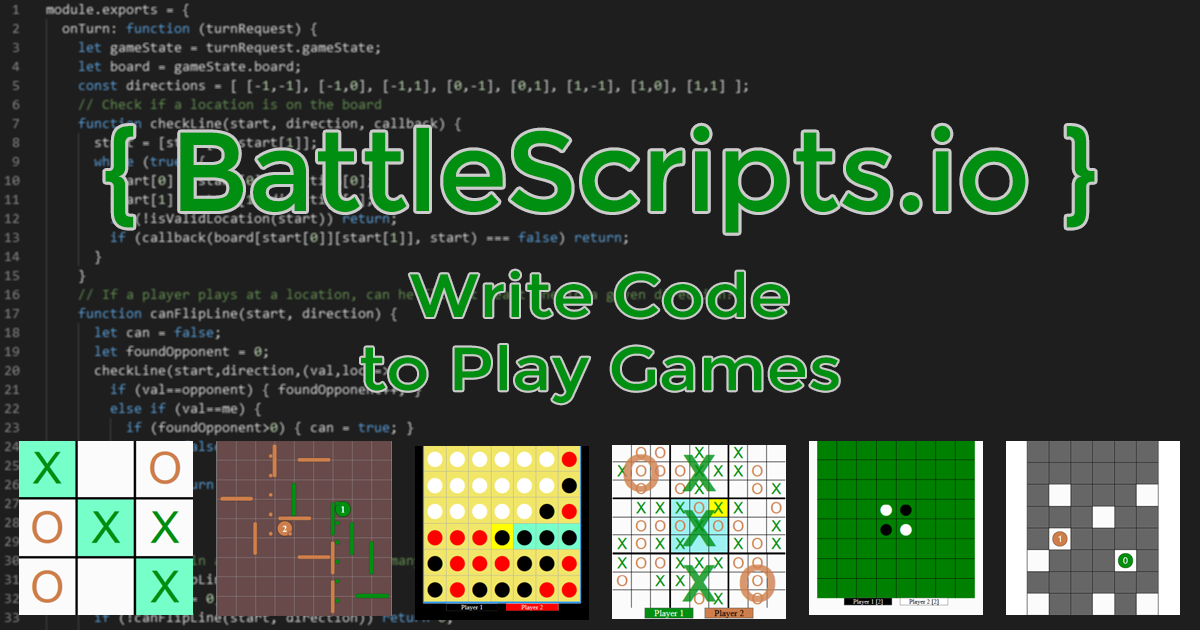
<style>
.page{position:relative;width:1200px;height:630px;background:#1e1e1e}
.page>*{position:absolute;margin:0}
.t1{font:112px "Montserrat-Regular";color:#008f11}
.t2{font:61px "Montserrat-Regular";color:#008f11;scale:1.1 1}
</style>
<div class="page">
<p class="t1" style="left:105px;top:125px;width:990px;height:108px">{ BattleScripts.io }</p>
<p class="t2" style="left:361px;top:270px;width:478px;height:134px;text-align:center">Write Code<br>to Play Games</p>
</div>
